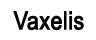
<style>
.page{position:relative;width:96px;height:40px;background:#ffffff}
.page>*{position:absolute;margin:0}
.t1{font:25px "ArialMT";color:#000000;font-weight:bold;scale:0.85 1}
</style>
<div class="page">
<p class="t1" style="left:13px;top:11px;width:71px;height:20px">Vaxelis</p>
</div>
